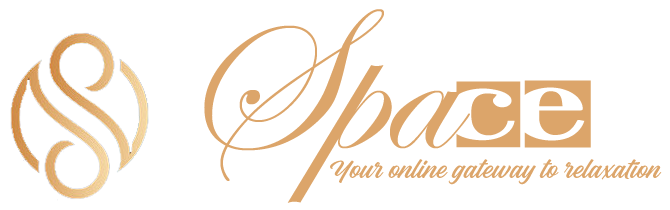
<style>
.page{position:relative;width:670px;height:210px;background:#ffffff}
.page>*{position:absolute;margin:0}
.t1{font:208.3px "EdwardianScriptITC";color:#dca56a}
.t2{font:100px "NegativeSpace-Regular";color:#dca56a}
.t3{font:25px "SimpleThreadPERSONALUSE-Regular";color:#dca56a}
</style>
<div class="page">
<p class="t1" style="left:204px;top:9px;width:266px;height:194px">Spa</p>
<p class="t2" style="left:456px;top:80px;width:135px;height:68px">CE</p>
<p class="t3" style="left:330px;top:159px;width:332px;height:26px">Your online gateway to relaxation</p>
</div>
